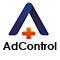
<style>
.page{position:relative;width:60px;height:60px;background:#ffffff}
.page>*{position:absolute;margin:0}
.t1{font:11px "CenturyGothic-Bold";color:#030303}
</style>
<div class="page">
<p class="t1" style="left:3px;top:42px;width:54px;height:8px">AdControl</p>
</div>
